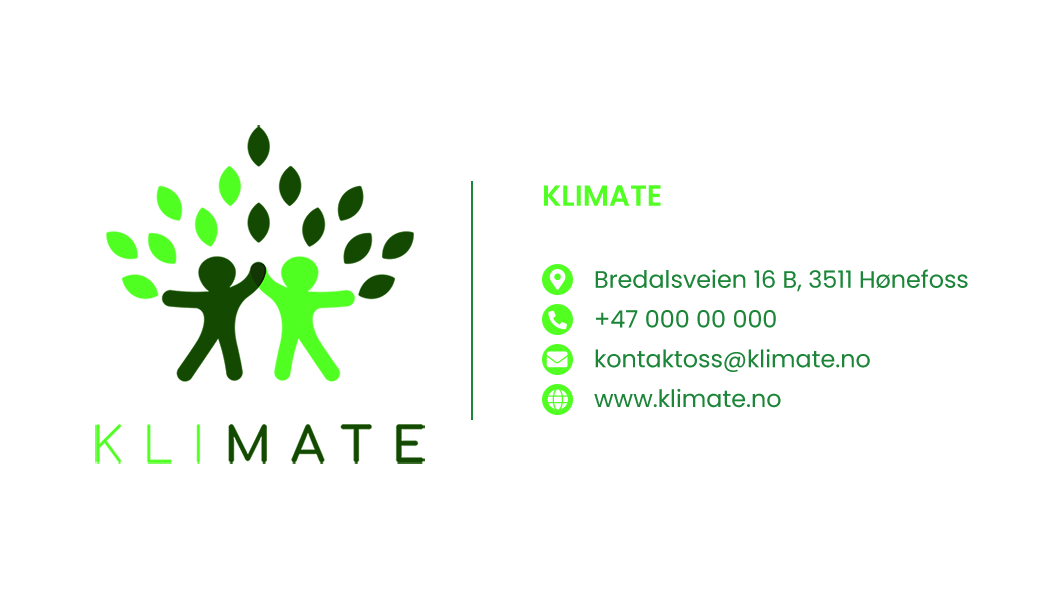
<style>
.page{position:relative;width:1050px;height:600px;background:#ffffff}
.page>*{position:absolute;margin:0}
.t1{font:29.2px "Poppins-SemiBold";color:#51ff22;text-transform:uppercase}
.t2{font:23.8px/39.7px "Poppins-Regular";color:#1d8538}
</style>
<div class="page">
<p class="t1" style="left:544px;top:185px;width:117px;height:21px">Klimate</p>
<p class="t2" style="left:594px;top:269px;width:374px;height:139px">Bredalsveien 16 B, 3511 Hønefoss<br>+47 000 00 000<br>kontaktoss@klimate.no<br>www.klimate.no</p>
</div>
